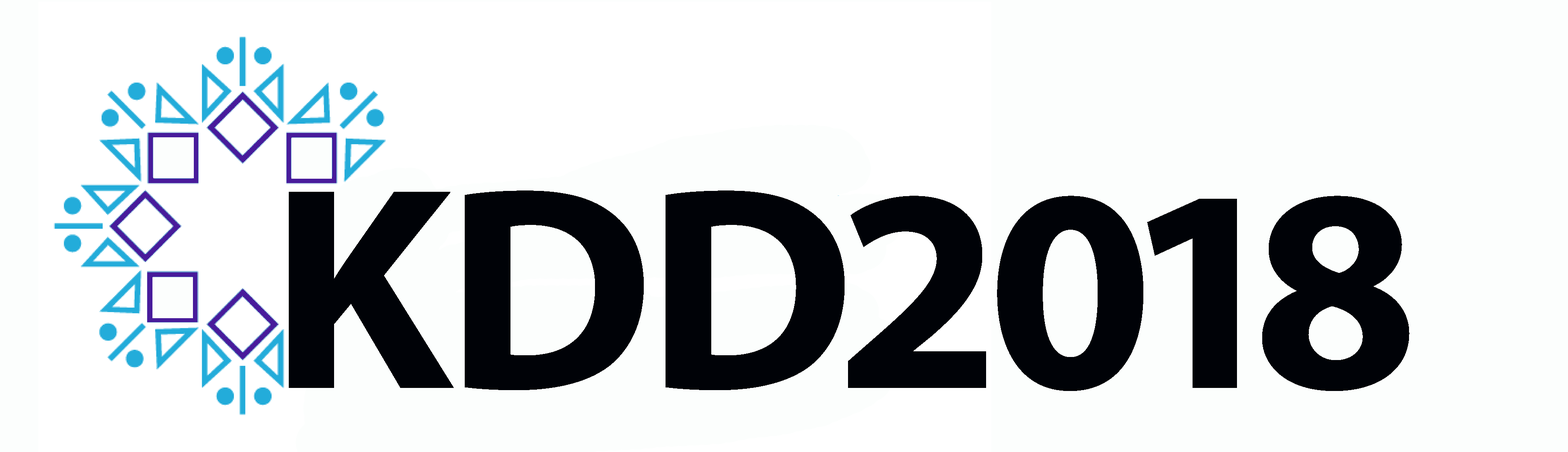
<style>
.page{position:relative;width:1568px;height:452px;background:#fcfefd}
.page>*{position:absolute;margin:0}
.t1{font:290.4px "MyriadPro-Bold";letter-spacing:-0.025em;color:#000207}
</style>
<div class="page">
<p class="t1" style="left:289px;top:190px;width:1120px;height:201px">KDD2018</p>
</div>
